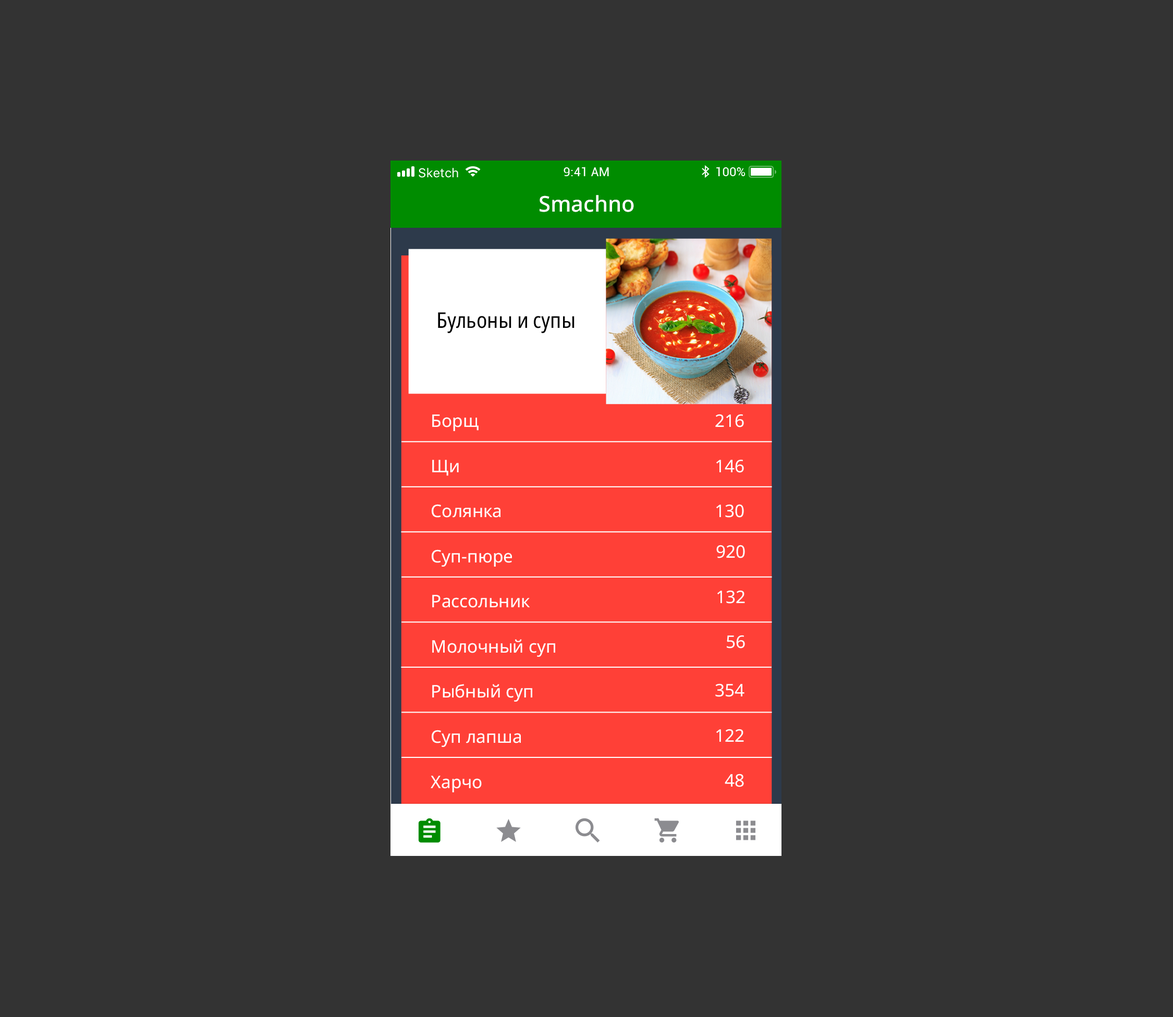
<style>
.page{position:relative;width:1173px;height:1017px;background:#333333}
.page>*{position:absolute;margin:0}
.t1{font:21.7px "NotoSans-Medium";color:#ffffff}
.t2{font:21.7px "NotoSans-Condensed";color:#000000}
.t3{font:17.4px "NotoSans-Regular";color:#ffffff}
</style>
<div class="page">
<p class="t1" style="left:539px;top:195px;width:95px;height:17px">Smachno</p>
<p class="t2" style="left:438px;top:312px;width:136px;height:21px">Бульоны и супы</p>
<p class="t3" style="left:715px;top:414px;width:29px;height:13px">216</p>
<p class="t3" style="left:432px;top:414px;width:46px;height:17px">Борщ</p>
<p class="t3" style="left:432px;top:460px;width:27px;height:16px">Щи</p>
<p class="t3" style="left:716px;top:459px;width:28px;height:14px">146</p>
<p class="t3" style="left:432px;top:504px;width:68px;height:14px">Солянка</p>
<p class="t3" style="left:716px;top:504px;width:28px;height:14px">130</p>
<p class="t3" style="left:716px;top:545px;width:29px;height:13px">920</p>
<p class="t3" style="left:432px;top:549px;width:80px;height:18px">Суп-пюре</p>
<p class="t3" style="left:717px;top:590px;width:28px;height:14px">132</p>
<p class="t3" style="left:432px;top:595px;width:98px;height:13px">Рассольник</p>
<p class="t3" style="left:432px;top:639px;width:123px;height:18px">Молочный суп</p>
<p class="t3" style="left:727px;top:635px;width:18px;height:13px">56</p>
<p class="t3" style="left:432px;top:684px;width:100px;height:18px">Рыбный суп</p>
<p class="t3" style="left:715px;top:683px;width:29px;height:14px">354</p>
<p class="t3" style="left:432px;top:730px;width:89px;height:17px">Суп лапша</p>
<p class="t3" style="left:716px;top:729px;width:28px;height:13px">122</p>
<p class="t3" style="left:724px;top:773px;width:20px;height:14px">48</p>
<p class="t3" style="left:431px;top:776px;width:51px;height:16px">Харчо</p>
</div>
